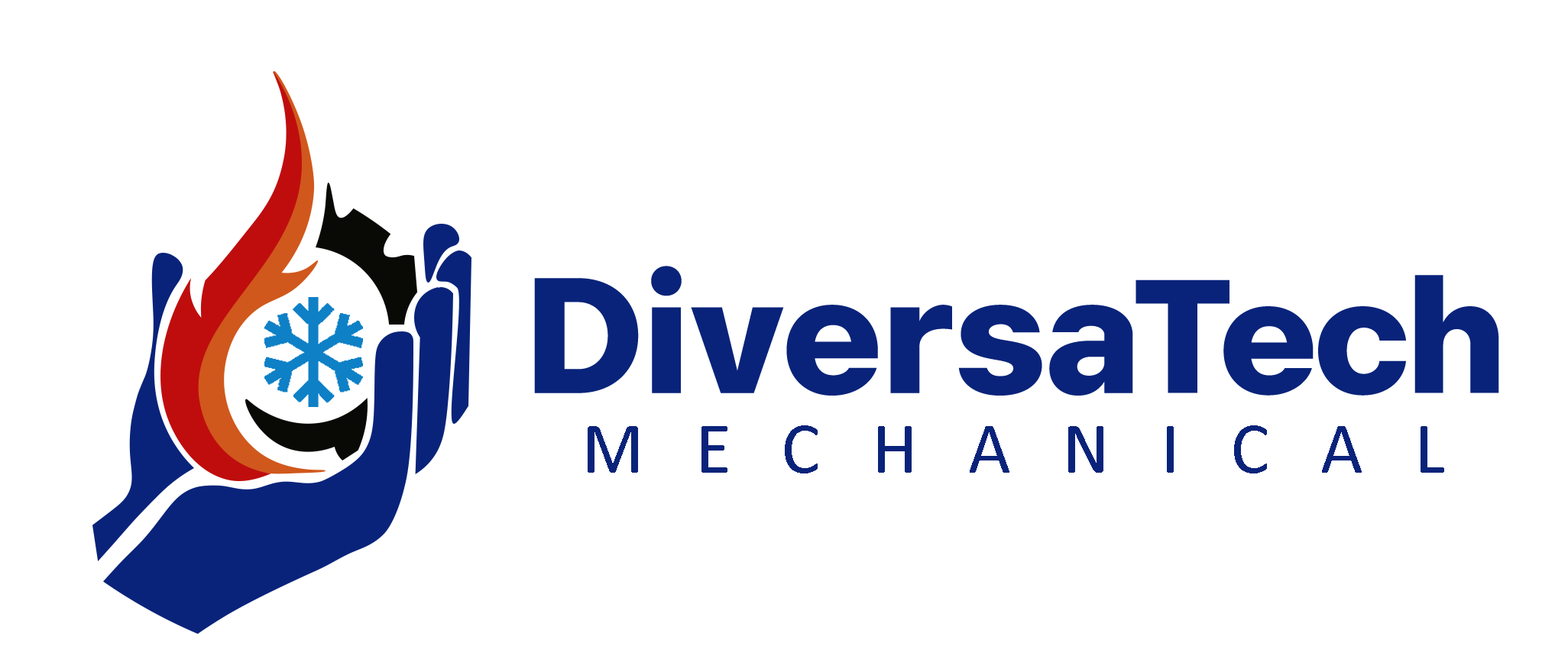
<style>
.page{position:relative;width:1568px;height:672px;background:#ffffff}
.page>*{position:absolute;margin:0}
.t1{font:162.4px "Dortmund-ExtraBold";letter-spacing:-0.025em;color:#09237a}
.t2{font:159.2px "Dortmund-ExtraBold";letter-spacing:-0.045em;color:#09237a}
.t3{font:171.9px "TangoSans";letter-spacing:0.04em;color:#09237a}
.t4{font:73.2px "Calibri";letter-spacing:0.7em;color:#09237a}
</style>
<div class="page">
<p class="t1" style="left:534px;top:266px;width:599px;height:130px">Diversa</p>
<p class="t2" style="left:1136px;top:275px;width:363px;height:121px"><span class="t3"> </span>Tech</p>
<p class="t4" style="left:588px;top:426px;width:856px;height:48px">MECHANICAL</p>
</div>
